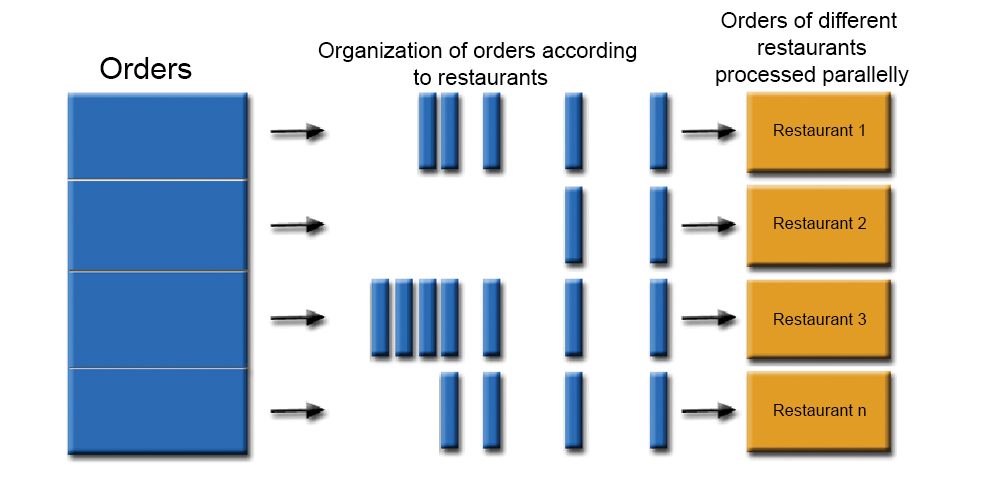
<style>
.page{position:relative;width:1000px;height:500px;background:#ffffff}
.page>*{position:absolute;margin:0}
.t1{font:22.3px "ArialMT";color:#000000}
.t2{font:22.2px "ArialMT";color:#000000}
.t3{font:30.6px "ArialMT";color:#000000}
.t4{font:16.7px "ArialMT";color:#000000}
</style>
<div class="page">
<p class="t1" style="left:716px;top:12px;width:193px;height:74px;text-align:center">Orders of different <br>restaurants<br>processed parallelly</p>
<p class="t2" style="left:318px;top:42px;width:319px;height:43px;text-align:center">Organization of orders according <br>to restaurants</p>
<p class="t3" style="left:100px;top:57px;width:92px;height:22px">Orders</p>
<p class="t4" style="left:774px;top:124px;width:90px;height:12px">Restaurant 1</p>
<p class="t4" style="left:774px;top:217px;width:92px;height:12px">Restaurant 2</p>
<p class="t4" style="left:774px;top:313px;width:93px;height:12px">Restaurant 3</p>
<p class="t4" style="left:774px;top:404px;width:92px;height:12px">Restaurant n</p>
</div>
